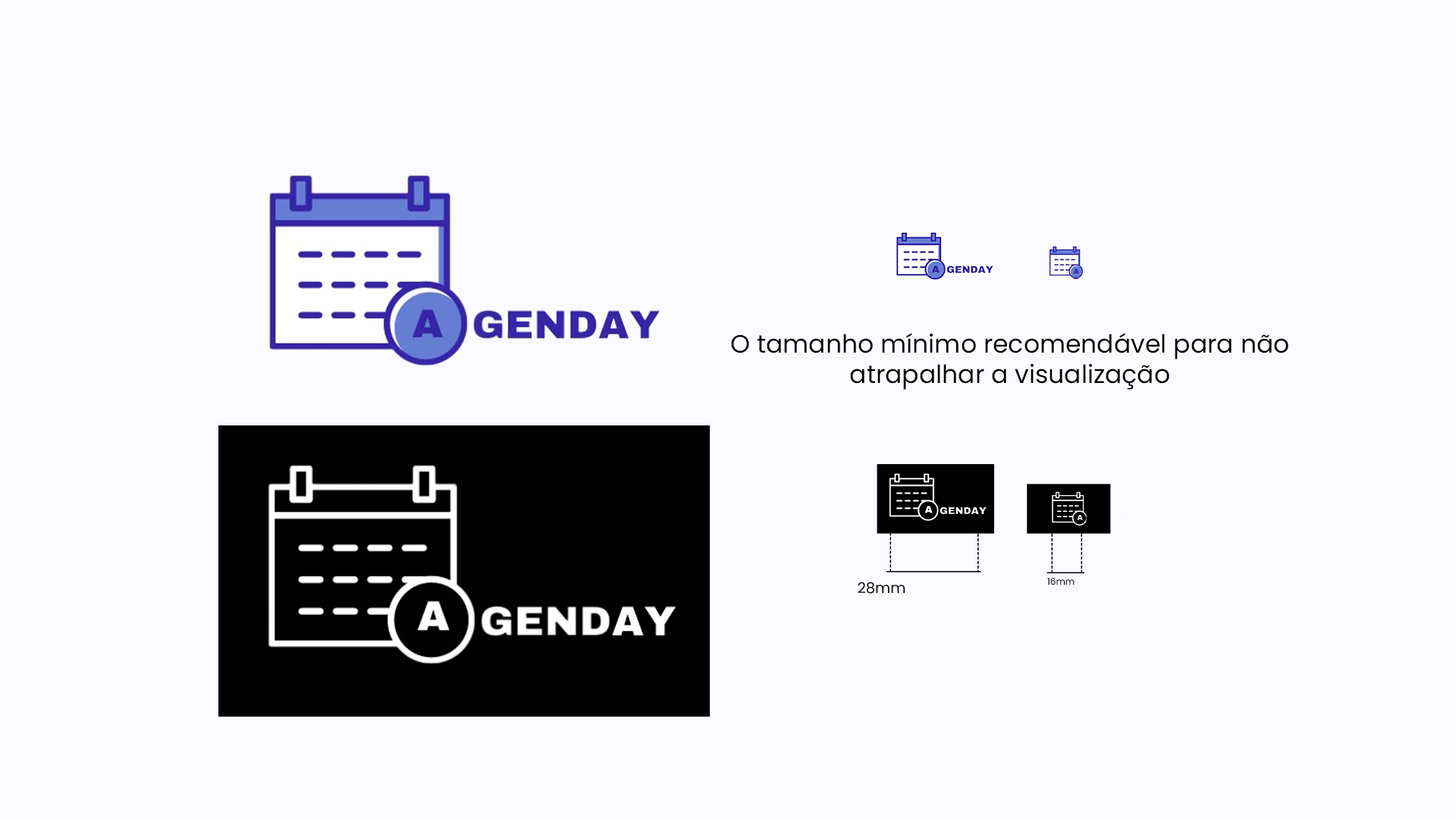
<style>
.page{position:relative;width:1456px;height:819px;background:#fbfbff}
.page>*{position:absolute;margin:0}
.t1{font:25.1px "Poppins-Regular";color:#000000}
.t2{font:14.8px "Poppins-Regular";color:#000000}
.t3{font:9.1px "Poppins-Regular";color:#000000}
</style>
<div class="page">
<p class="t1" style="left:731px;top:333px;width:557px;height:57px;text-align:center">O tamanho mínimo recomendável para não <br>atrapalhar a visualização</p>
<p class="t2" style="left:858px;top:582px;width:47px;height:12px">28mm</p>
<p class="t3" style="left:1047px;top:578px;width:28px;height:7px">16mm</p>
</div>
